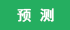
<style>
.page{position:relative;width:70px;height:30px;background:#25ae60}
.page>*{position:absolute;margin:0}
.t1{font:14.4px "SimHei";letter-spacing:0.02em;color:#ffffff;font-weight:bold}
</style>
<div class="page">
<p class="t1" style="left:17px;top:8px;width:37px;height:14px">预 测</p>
</div>
